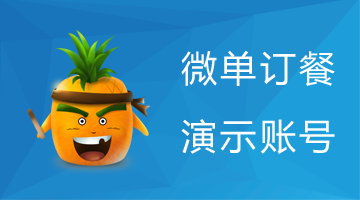
<style>
.page{position:relative;width:360px;height:200px}
.page>*{position:absolute;margin:0}
.t1{font:36px/68px "MicrosoftYaHei";letter-spacing:0.1em;color:#ffffff}
</style>
<div class="page">
<p class="t1" style="left:181px;top:50px;width:154px;height:104px;text-align:center">微单订餐<br>演示账号</p>
</div>
